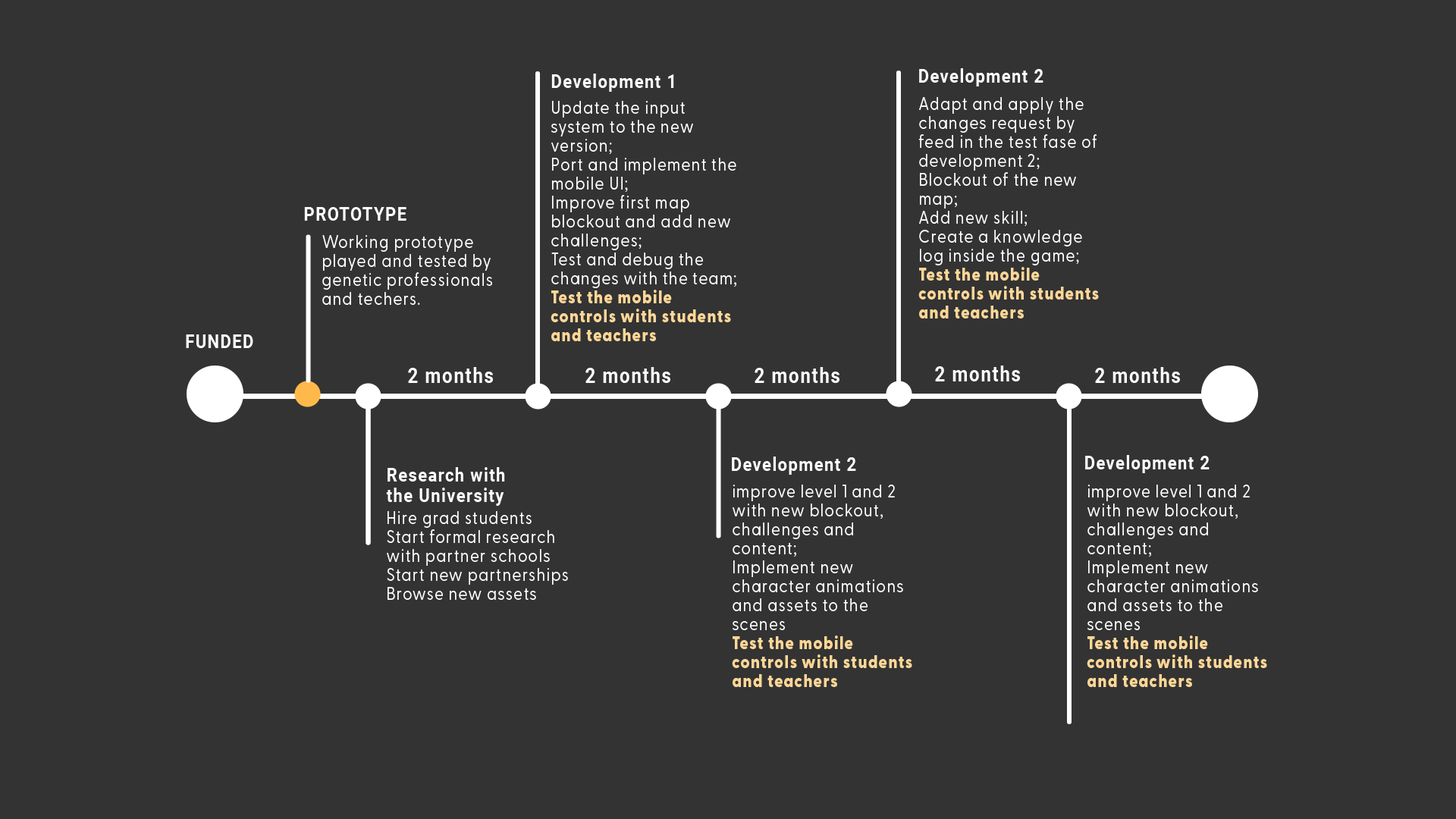
<style>
.page{position:relative;width:1456px;height:819px;background:#333333}
.page>*{position:absolute;margin:0}
.t1{font:19.3px "Roboto-Bold";letter-spacing:0.06em;color:#ffffff;scale:0.87 1}
.t2{font:18.2px "GreycliffCF-Regular";letter-spacing:0.06em;color:#ffffff;scale:0.87 1}
.t3{font:18.2px "GreycliffCF-Heavy";letter-spacing:0.06em;color:#ffd797;scale:0.87 1}
.t4{font:21.3px "Roboto-Bold";letter-spacing:0.06em;color:#ffffff;scale:0.87 1}
</style>
<div class="page">
<p class="t1" style="left:551px;top:74px;width:123px;height:18px">Development 1</p>
<p class="t1" style="left:919px;top:68px;width:124px;height:18px">Development 2</p>
<p class="t2" style="left:551px;top:101px;width:185px;height:240px">Update the input system to the new version;<br>Port and implement the mobile UI;<br>Improve first map blockout and add new challenges;<br>Test and debug the changes with the team;<br><span class="t3">Test the mobile controls with students and teachers</span></p>
<p class="t2" style="left:918px;top:97px;width:181px;height:221px">Adapt and apply the changes request by feed in the test fase of development 2;<br>Blockout of the new map;<br>Add new skill;<br>Create a knowledge log inside the game;<br><span class="t3">Test the mobile controls with students and teachers</span></p>
<p class="t1" style="left:304px;top:207px;width:102px;height:14px">PROTOTYPE</p>
<p class="t2" style="left:322px;top:235px;width:170px;height:70px">Working prototype played and tested by genetic professionals and techers.</p>
<p class="t1" style="left:186px;top:334px;width:67px;height:14px">FUNDED</p>
<p class="t4" style="left:935px;top:366px;width:85px;height:15px">2 months</p>
<p class="t4" style="left:408px;top:367px;width:85px;height:16px">2 months</p>
<p class="t4" style="left:585px;top:367px;width:85px;height:16px">2 months</p>
<p class="t4" style="left:755px;top:367px;width:84px;height:16px">2 months</p>
<p class="t4" style="left:1095px;top:367px;width:85px;height:16px">2 months</p>
<p class="t1" style="left:732px;top:457px;width:124px;height:18px">Development 2</p>
<p class="t1" style="left:1085px;top:455px;width:125px;height:18px">Development 2</p>
<p class="t1" style="left:386px;top:467px;width:119px;height:39px">Research with<br>the University</p>
<p class="t2" style="left:732px;top:485px;width:180px;height:202px">improve level 1 and 2 with new blockout, challenges and content;<br>Implement new character animations and assets to the scenes<br><span class="t3">Test the mobile controls with students and teachers</span></p>
<p class="t2" style="left:1087px;top:485px;width:180px;height:202px">improve level 1 and 2 with new blockout, challenges and content;<br>Implement new character animations and assets to the scenes<br><span class="t3">Test the mobile controls with students and teachers</span></p>
<p class="t2" style="left:387px;top:511px;width:181px;height:89px">Hire grad students<br>Start formal research with partner schools<br>Start new partnerships<br>Browse new assets</p>
</div>
